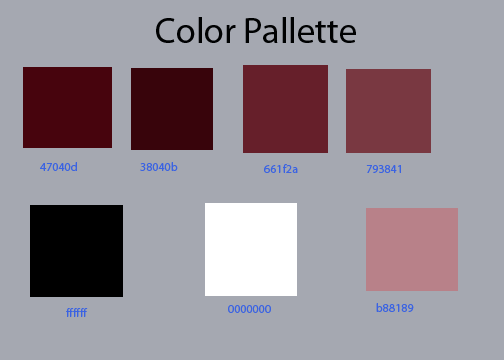
<style>
.page{position:relative;width:504px;height:360px;background:#a5a8b1}
.page>*{position:absolute;margin:0}
.t1{font:36px "MyriadPro-Regular";color:#000102}
.t2{font:12px "MyriadPro-Regular";color:#3b63e2}
</style>
<div class="page">
<p class="t1" style="left:156px;top:17px;width:200px;height:26px">Color Pallette</p>
<p class="t2" style="left:40px;top:162px;width:37px;height:9px">47040d</p>
<p class="t2" style="left:140px;top:162px;width:38px;height:9px">38040b</p>
<p class="t2" style="left:264px;top:164px;width:34px;height:9px">661f2a</p>
<p class="t2" style="left:366px;top:165px;width:35px;height:8px">793841</p>
<p class="t2" style="left:228px;top:305px;width:43px;height:8px">0000000</p>
<p class="t2" style="left:376px;top:303px;width:38px;height:9px">b88189</p>
<p class="t2" style="left:66px;top:308px;width:22px;height:9px">ffffff</p>
</div>
